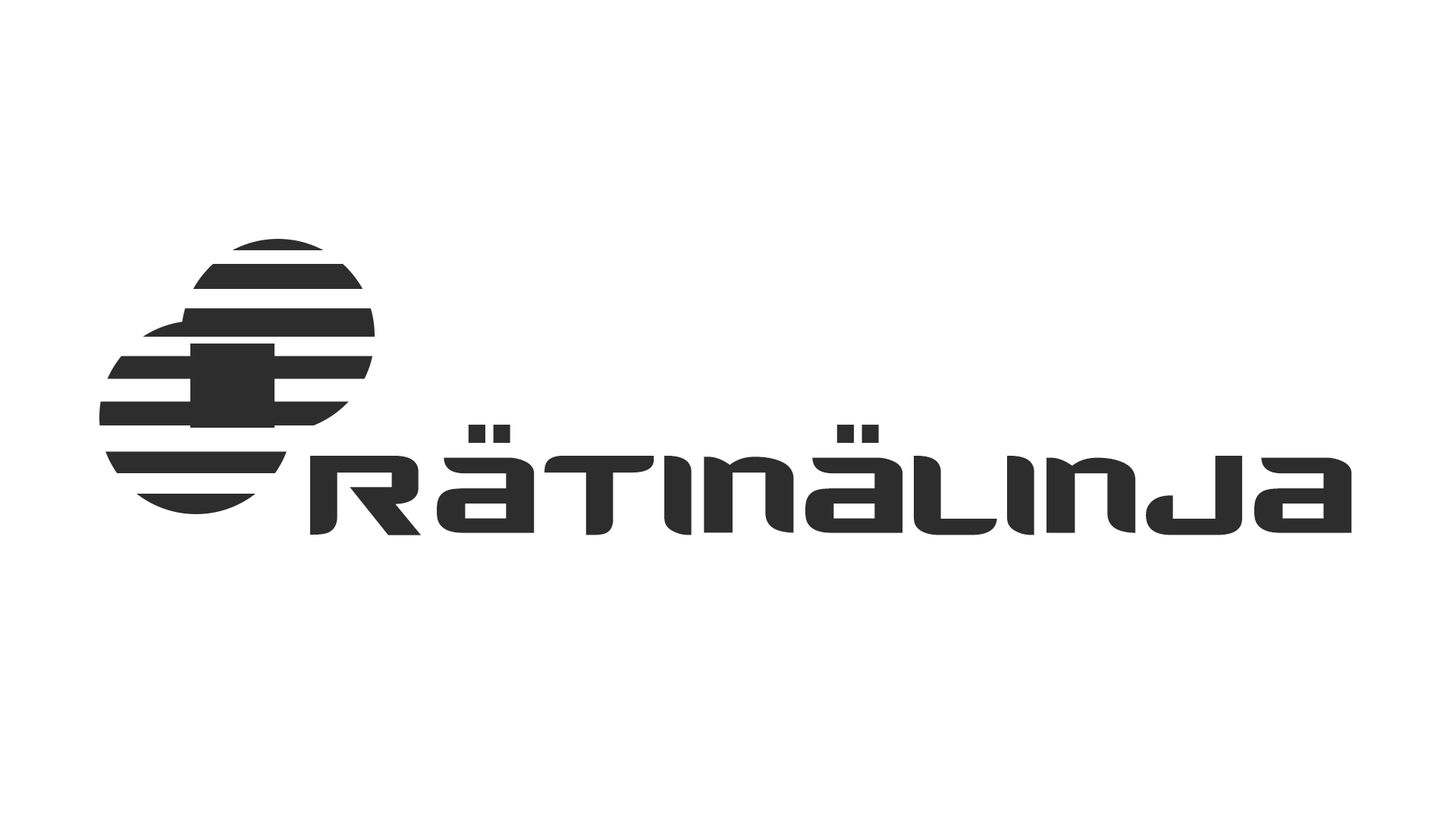
<style>
.page{position:relative;width:1456px;height:819px;background:#ffffff}
.page>*{position:absolute;margin:0}
.t1{font:252.8px "CloneWars";color:#2d2d2d;scale:0.7 1}
.t2{font:287.5px "CloneWars";color:#2d2d2d;scale:0.7 1}
.t3{font:290.7px "CloneWars";color:#2d2d2d;scale:0.7 1}
</style>
<div class="page">
<p class="t1" style="left:310px;top:425px;width:1042px;height:110px">R<span class="t2">ä</span>TI<span class="t3">n</span><span class="t2">ä</span>LI<span class="t2">n</span>J<span class="t2">a</span></p>
</div>
